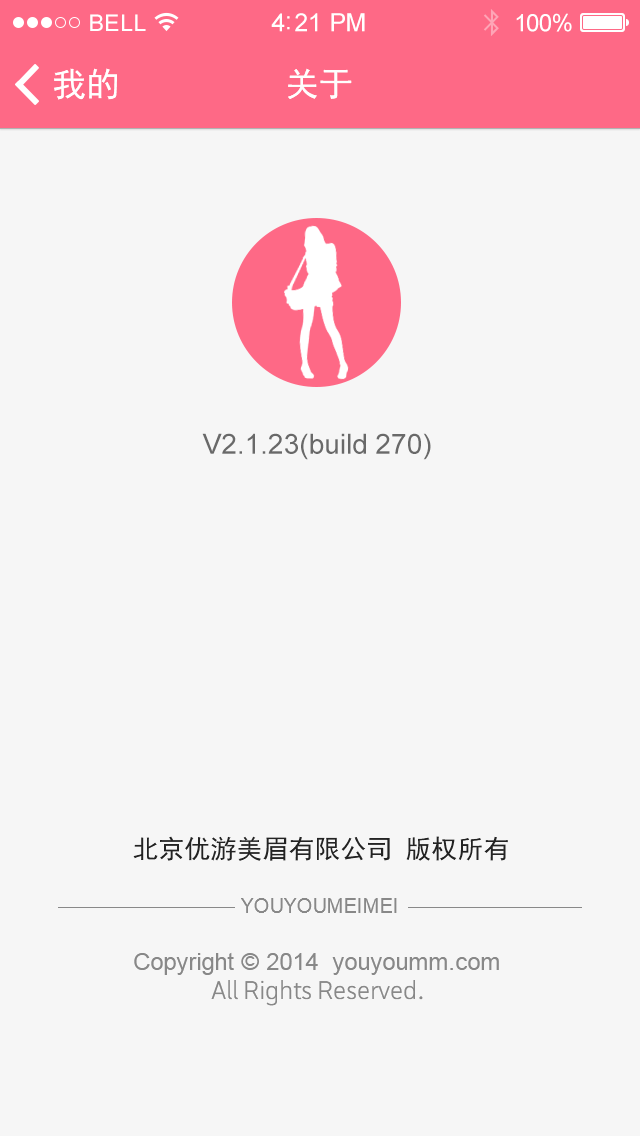
<style>
.page{position:relative;width:640px;height:1136px;background:#f6f6f6}
.page>*{position:absolute;margin:0}
.t1{font:23px "ArialMT";letter-spacing:0.02em;color:#ffffff}
.t2{font:25px "ArialMT";letter-spacing:-0.02em;color:#ffffff}
.t3{font:24px "ArialMT";letter-spacing:-0.02em;color:#ffffff}
.t4{font:34px "SimHei";color:#ffffff}
.t5{font:34px "SimHei";color:#fefefe}
.t6{font:28px "ArialMT";color:#696969}
.t7{font:26px "SimHei";color:#232323}
.t8{font:20px "ArialMT";color:#888888}
.t9{font:24px "ArialMT";color:#888888}
.t10{font:24px "STHeitiSC-Light";color:#888888}
</style>
<div class="page">
<p class="t1" style="left:90px;top:14px;width:56px;height:17px">BELL</p>
<p class="t2" style="left:271px;top:13px;width:94px;height:19px">4:21 PM</p>
<p class="t3" style="left:516px;top:13px;width:56px;height:19px">100%</p>
<p class="t4" style="left:54px;top:68px;width:63px;height:32px">我的</p>
<p class="t5" style="left:288px;top:68px;width:64px;height:31px">关于</p>
<p class="t6" style="left:202px;top:433px;width:229px;height:27px">V2.1.23(build 270)</p>
<p class="t7" style="left:133px;top:836px;width:375px;height:25px">北京优游美眉有限公司 版权所有</p>
<p class="t8" style="left:241px;top:898px;width:156px;height:15px">YOUYOUMEIMEI</p>
<p class="t9" style="left:134px;top:952px;width:365px;height:23px">Copyright © 2014  youyoumm.com</p>
<p class="t10" style="left:211px;top:980px;width:212px;height:26px">All Rights Reserved.</p>
</div>
